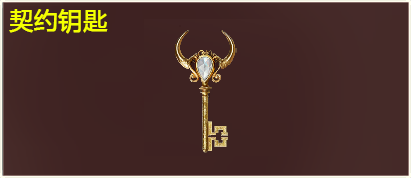
<style>
.page{position:relative;width:411px;height:178px}
.page>*{position:absolute;margin:0}
.t1{font:24px "MicrosoftYaHei";color:#f4ff00;font-weight:bold}
</style>
<div class="page">
<p class="t1" style="left:9px;top:9px;width:99px;height:25px">契约钥匙</p>
</div>
